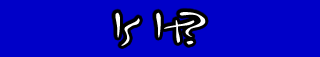
<style>
.page{position:relative;width:320px;height:57px;background:#0000c8}
.page>*{position:absolute;margin:0}
.t1{font:48px "Inkburrow";color:#ffffff;text-transform:uppercase}
</style>
<div class="page">
<p class="t1" style="left:115px;top:12px;width:91px;height:34px">Is It?</p>
</div>
